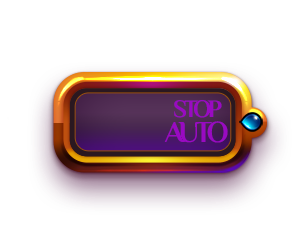
<style>
.page{position:relative;width:300px;height:250px;background:#ffffff}
.page>*{position:absolute;margin:0}
.t1{font:25px "ElMessiri-Bold";letter-spacing:-0.15em;color:#990ac2;text-transform:uppercase}
.t2{font:30.3px "ElMessiri-Bold";letter-spacing:-0.15em;color:#990ac2;text-transform:uppercase}
</style>
<div class="page">
<p class="t1" style="left:174px;top:100px;width:48px;height:18px">STOP</p>
<p class="t2" style="left:164px;top:121px;width:64px;height:22px">auto</p>
</div>
